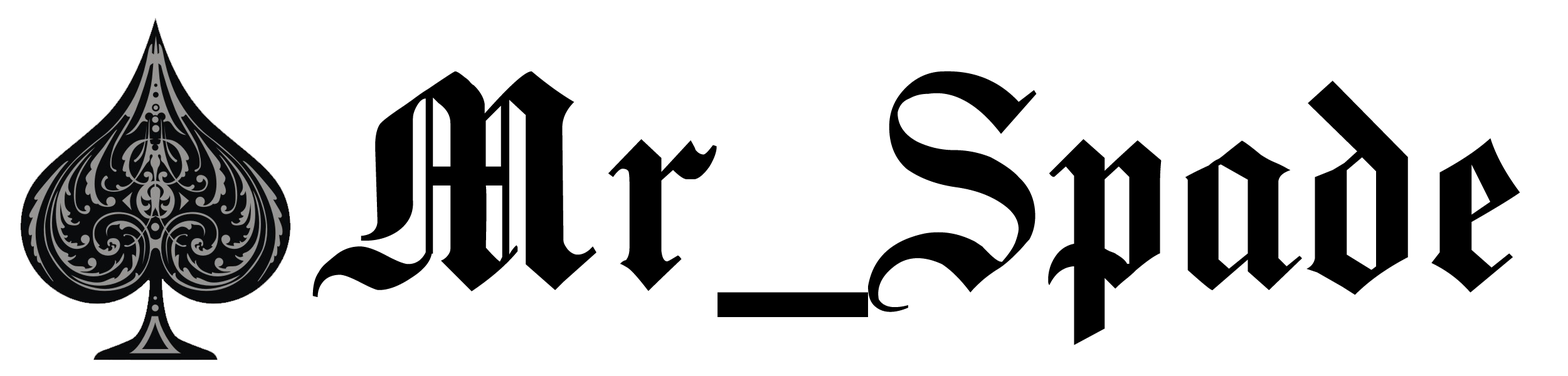
<style>
.page{position:relative;width:1568px;height:376px;background:#ffffff}
.page>*{position:absolute;margin:0}
.t1{font:301.1px "REEJIStar-LiLing-Gothic-GB";color:#000000}
</style>
<div class="page">
<p class="t1" style="left:312px;top:71px;width:1208px;height:275px">Mr_Spade</p>
</div>
